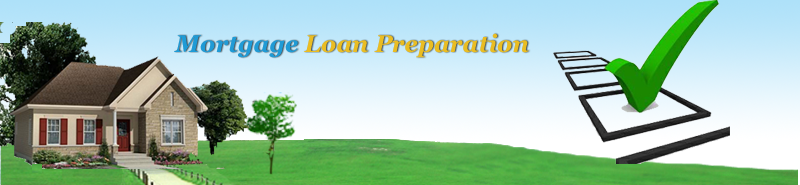
<style>
.page{position:relative;width:800px;height:185px}
.page>*{position:absolute;margin:0}
.t1{font:24px "Georgia-BoldItalic";color:#eabd22}
.t2{font:24px "CourierNewPS-BoldItalicMT";color:#0871dd}
.t3{font:24px "Georgia-BoldItalic";color:#1f9bd6}
</style>
<div class="page">
<p class="t1" style="left:174px;top:33px;width:355px;height:25px"><span class="t2">   </span><span class="t3">Mortgage </span>Loan Preparation</p>
</div>
